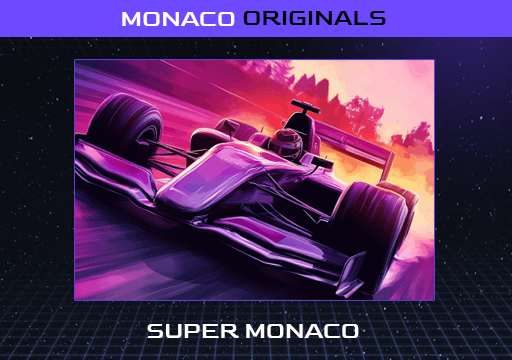
<style>
.page{position:relative;width:512px;height:360px}
.page>*{position:absolute;margin:0}
.t1{font:23.9px "Goldman-Regular";color:#ffffff}
.t2{font:23.9px "Goldman-Regular";color:#000000}
</style>
<div class="page">
<p class="t1" style="left:122px;top:12px;width:113px;height:14px">MONACO</p>
<p class="t2" style="left:243px;top:11px;width:143px;height:14px">ORIGINALS</p>
<p class="t1" style="left:147px;top:324px;width:212px;height:14px">SUPER MONACO</p>
</div>
